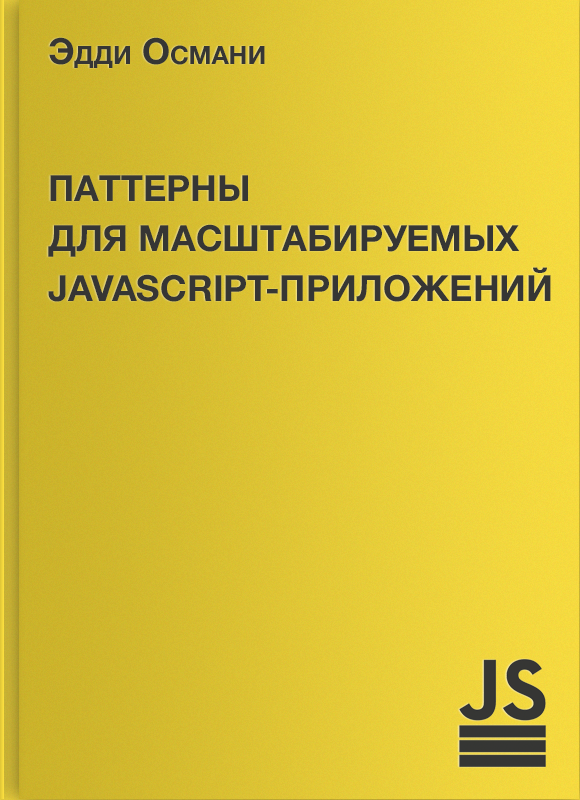
<style>
.page{position:relative;width:580px;height:800px}
.page>*{position:absolute;margin:0}
.t1{font:36px "HelveticaNeue-Bold";color:#363634;font-variant:small-caps}
.t2{font:36px/30px "HelveticaNeue-Bold";color:#363634;text-transform:uppercase}
</style>
<div class="page">
<p class="t1" style="left:49px;top:37px;width:216px;height:31px">Эдди Османи</p>
<p class="t2" style="left:48px;top:175px;width:503px;height:127px">Паттерны <br>для масштабируемых <br>JavaScript-приложений</p>
</div>
